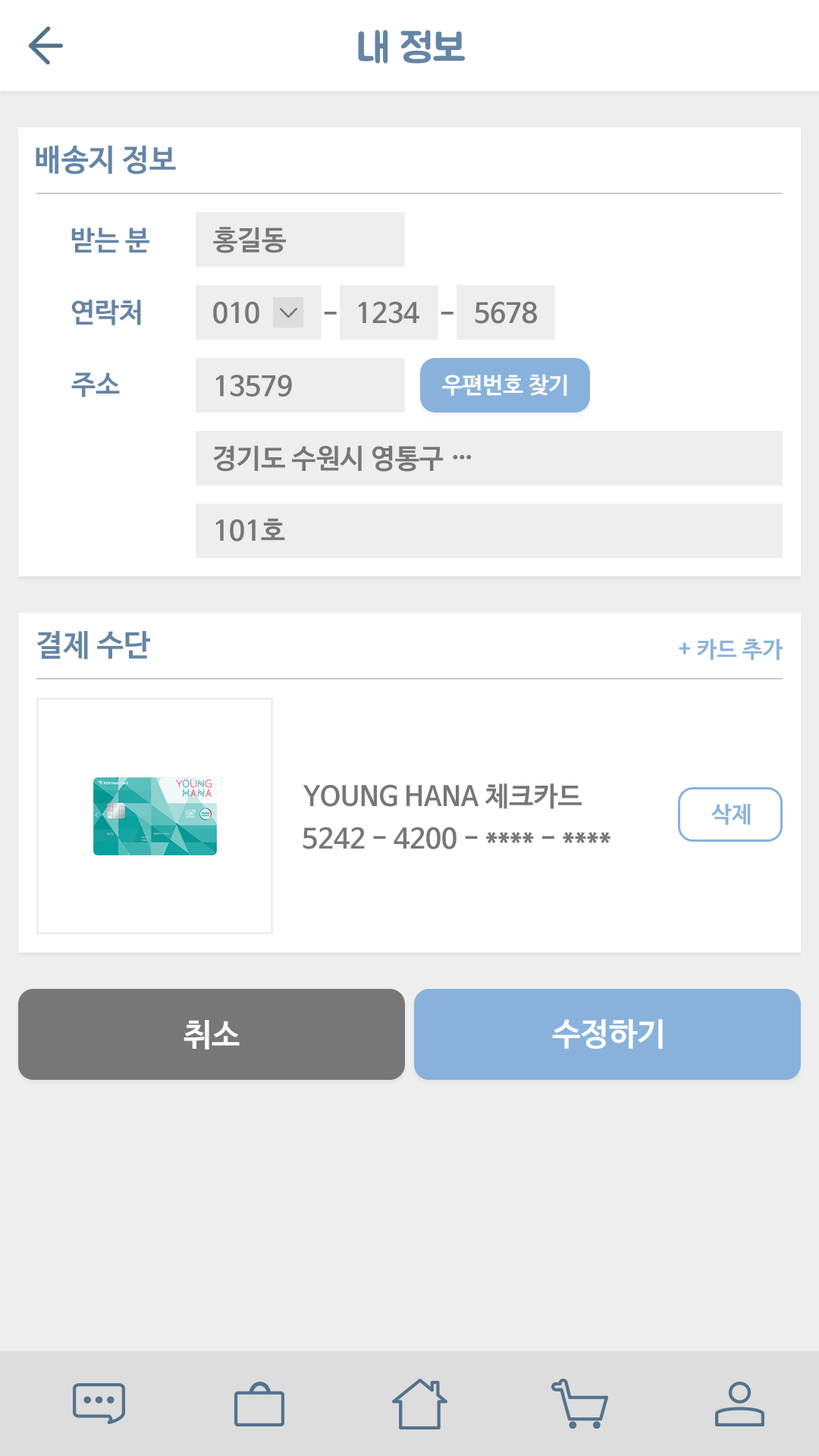
<style>
.page{position:relative;width:819px;height:1456px;background:#ffffff}
.page>*{position:absolute;margin:0}
.t1{font:40.9px "BMJUA";color:#6585a5}
.t2{font:30.3px "NanumBarunGothicBold";color:#6585a5}
.t3{font:27.3px "NanumBarunGothicBold";color:#6585a5}
.t4{font:27.3px "NanumBarunGothicBold";color:#777777}
.t5{font:22.7px "NanumBarunGothicBold";color:#ffffff}
.t6{font:22.7px "NanumBarunGothicBold";color:#88b2dc}
.t7{font:31.8px "NanumBarunGothicBold";color:#ffffff}
</style>
<div class="page">
<p class="t1" style="left:358px;top:30px;width:107px;height:34px">내 정보</p>
<p class="t2" style="left:36px;top:146px;width:140px;height:28px">배송지 정보</p>
<p class="t3" style="left:71px;top:227px;width:78px;height:26px">받는 분</p>
<p class="t4" style="left:213px;top:227px;width:73px;height:26px">홍길동</p>
<p class="t3" style="left:71px;top:300px;width:70px;height:25px">연락처</p>
<p class="t4" style="left:213px;top:301px;width:46px;height:23px">010</p>
<p class="t4" style="left:359px;top:301px;width:60px;height:23px">1234</p>
<p class="t4" style="left:475px;top:301px;width:62px;height:23px">5678</p>
<p class="t4" style="left:324px;top:312px;width:13px;height:3px">-</p>
<p class="t4" style="left:441px;top:312px;width:12px;height:3px">-</p>
<p class="t3" style="left:71px;top:372px;width:49px;height:25px">주소</p>
<p class="t4" style="left:216px;top:375px;width:76px;height:22px">13579</p>
<p class="t5" style="left:442px;top:375px;width:125px;height:21px">우편번호 찾기</p>
<p class="t4" style="left:213px;top:445px;width:258px;height:27px">경기도 수원시 영통구 …</p>
<p class="t4" style="left:216px;top:518px;width:69px;height:23px">101호</p>
<p class="t2" style="left:36px;top:631px;width:115px;height:29px">결제 수단</p>
<p class="t6" style="left:679px;top:639px;width:104px;height:21px">+ 카드 추가</p>
<p class="t4" style="left:303px;top:783px;width:279px;height:26px">YOUNG HANA 체크카드</p>
<p class="t6" style="left:711px;top:804px;width:40px;height:21px">삭제</p>
<p class="t4" style="left:303px;top:827px;width:307px;height:22px">5242 - 4200 - **** - ****</p>
<p class="t7" style="left:184px;top:1020px;width:56px;height:30px">취소</p>
<p class="t7" style="left:552px;top:1019px;width:111px;height:30px">수정하기</p>
</div>
